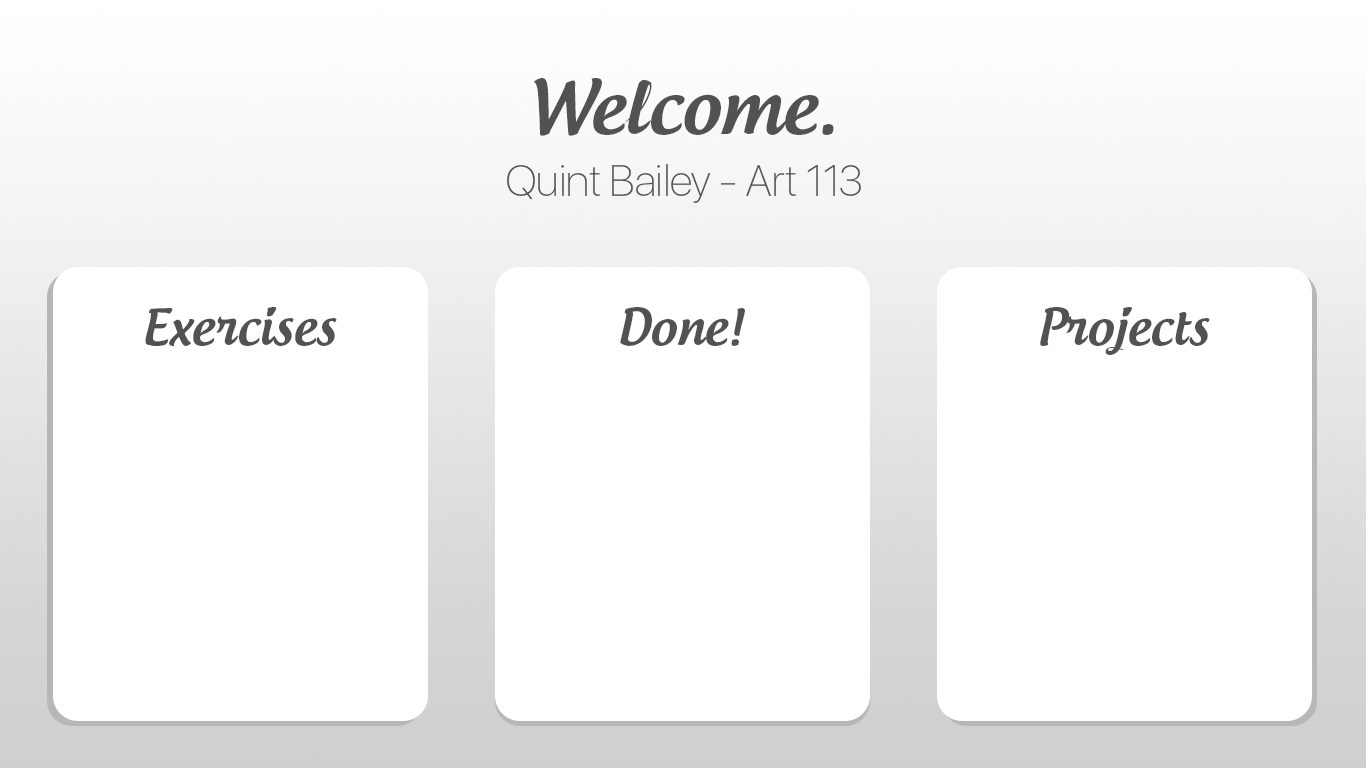
<style>
.page{position:relative;width:1366px;height:768px;background:#ffffff}
.page>*{position:absolute;margin:0}
.t1{font:72px "AndrogyneMedium";color:#525252}
.t2{font:43.2px "SFUIDisplay-Thin";color:#525252}
.t3{font:48px "AndrogyneMedium";color:#525252}
</style>
<div class="page">
<p class="t1" style="left:533px;top:78px;width:301px;height:58px">Welcome.</p>
<p class="t2" style="left:507px;top:164px;width:354px;height:39px">Quint Bailey - Art 113</p>
<p class="t3" style="left:145px;top:307px;width:192px;height:39px">Exercises</p>
<p class="t3" style="left:620px;top:307px;width:125px;height:39px">Done!</p>
<p class="t3" style="left:1040px;top:307px;width:170px;height:48px">Projects</p>
</div>
